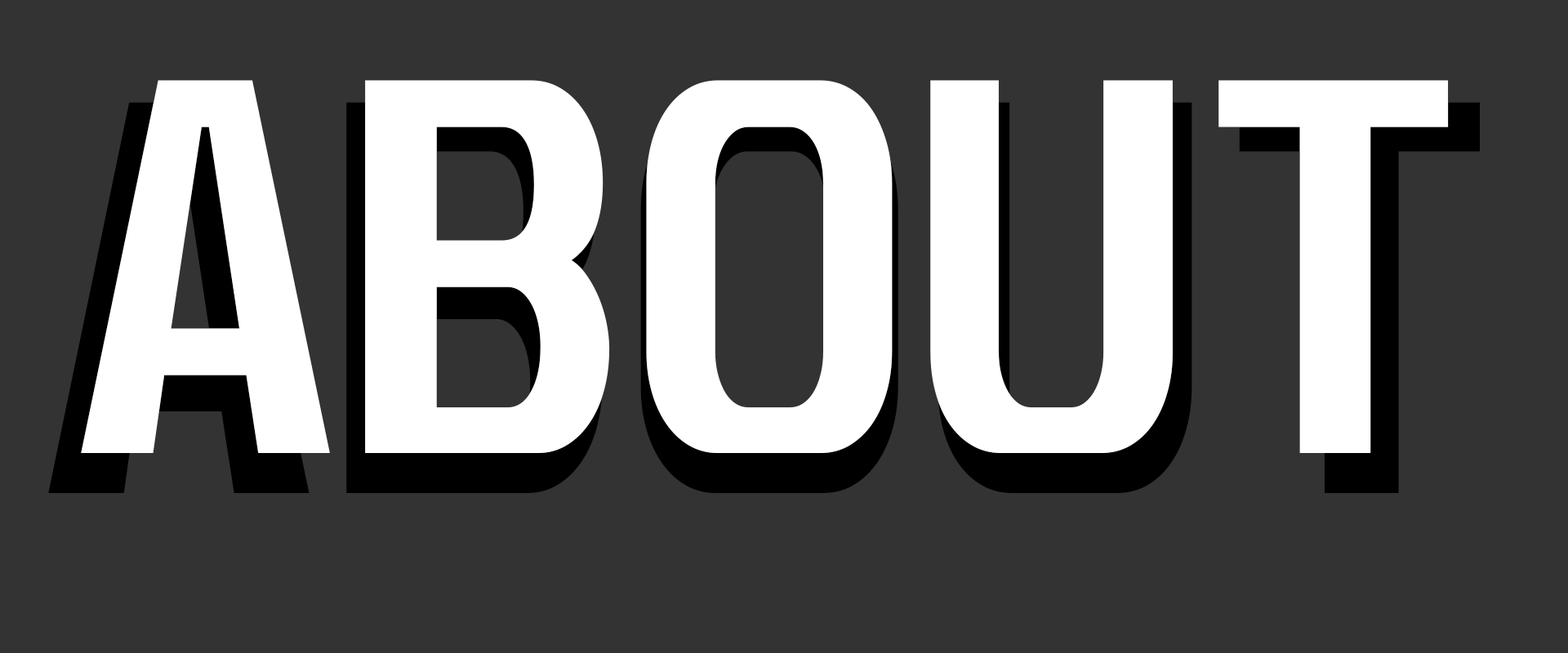
<style>
.page{position:relative;width:1568px;height:653px;background:#333333}
.page>*{position:absolute;margin:0}
.t1{font:461.2px "Unispace-Bold";color:#ffffff}
</style>
<div class="page">
<p class="t1" style="left:81px;top:80px;width:1368px;height:373px;text-align:center">ABOUT<br>v<br>t</p>
</div>
